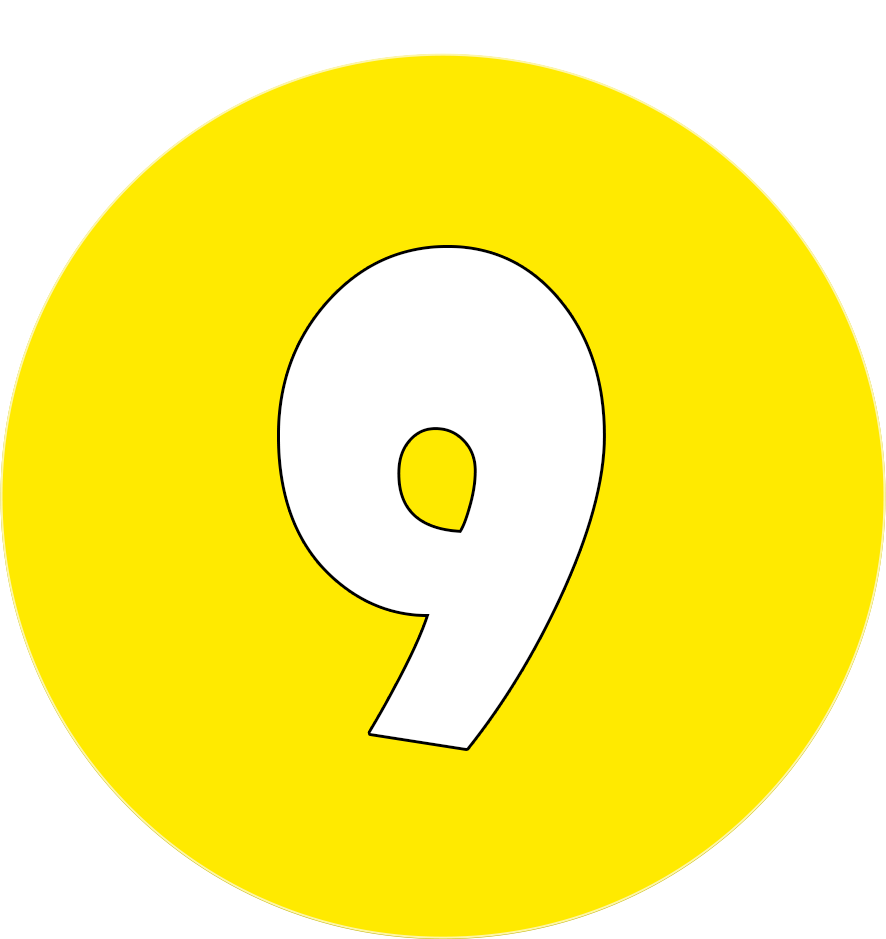
<style>
.page{position:relative;width:886px;height:939px;background:#ffea00}
.page>*{position:absolute;margin:0}
.t1{font:637.2px "ShowcardGothic-Reg";color:#ffffff}
</style>
<div class="page">
<p class="t1" style="left:280px;top:248px;width:323px;height:500px">9</p>
</div>
